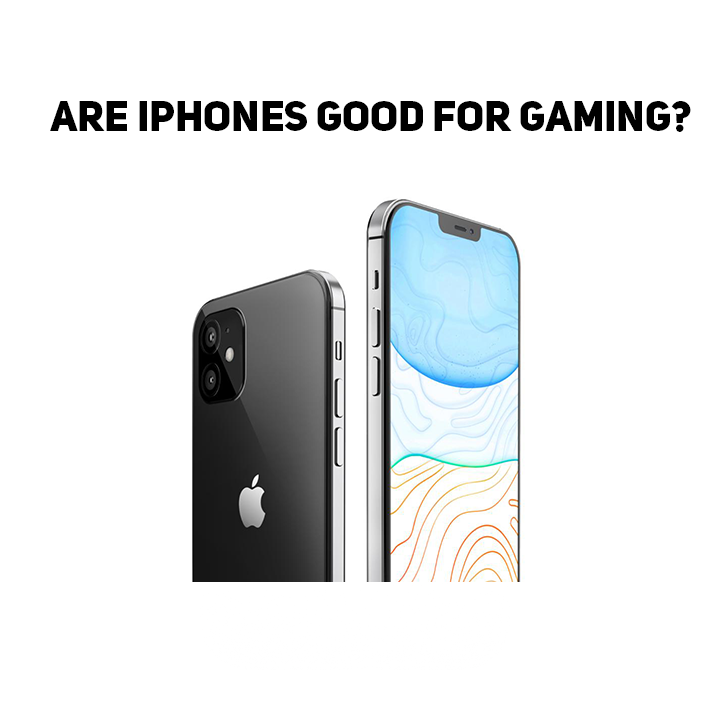
<style>
.page{position:relative;width:710px;height:710px;background:#ffffff}
.page>*{position:absolute;margin:0}
.t1{font:42px "UniSansHeavyCAPS";color:#000000}
</style>
<div class="page">
<p class="t1" style="left:50px;top:101px;width:641px;height:31px">ARE IPHONES GOOD FOR GAMING?</p>
</div>
